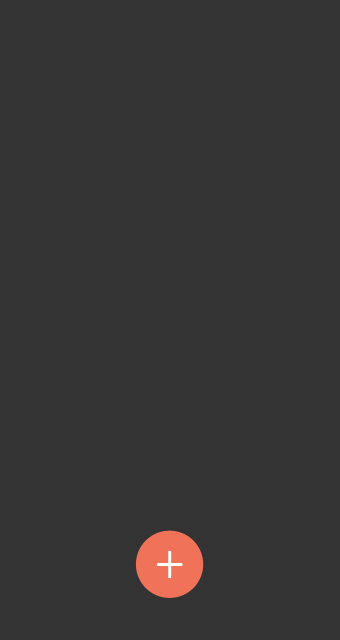
<style>
.page{position:relative;width:340px;height:640px;background:#333333}
.page>*{position:absolute;margin:0}
.t1{font:41.7px "CambriaMath";color:#ffffff}
</style>
<div class="page">
<p class="t1" style="left:157px;top:551px;width:26px;height:27px">+</p>
</div>
